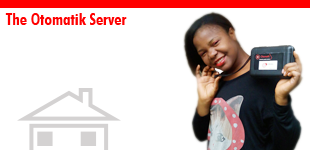
<style>
.page{position:relative;width:310px;height:150px;background:#ffffff}
.page>*{position:absolute;margin:0}
.t1{font:16.8px "FuturaBT-BoldCondensed";color:#ff0000}
</style>
<div class="page">
<p class="t1" style="left:5px;top:13px;width:122px;height:12px">The Otomatik Server</p>
</div>
